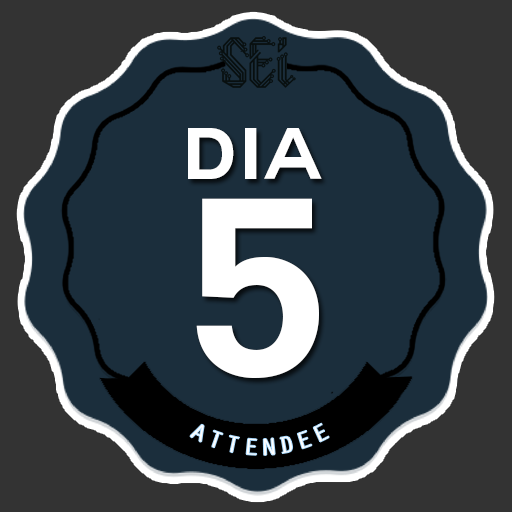
<style>
.page{position:relative;width:512px;height:512px;background:#1b2e3c}
.page>*{position:absolute;margin:0}
.t1{font:72px "Couture-Bold";letter-spacing:0.05em;color:#ffffff}
.t2{font:250px "Couture-Bold";letter-spacing:0.05em;color:#ffffff}
.t3{font:24px "OratorStd";letter-spacing:0.05em;color:#ffffff}
</style>
<div class="page">
<p class="t1" style="left:188px;top:128px;width:134px;height:51px">dia</p>
<p class="t2" style="left:196px;top:198px;width:123px;height:180px">5</p>
<p class="t3" style="left:190px;top:423px;width:139px;height:32px">ATTENDEE</p>
</div>
